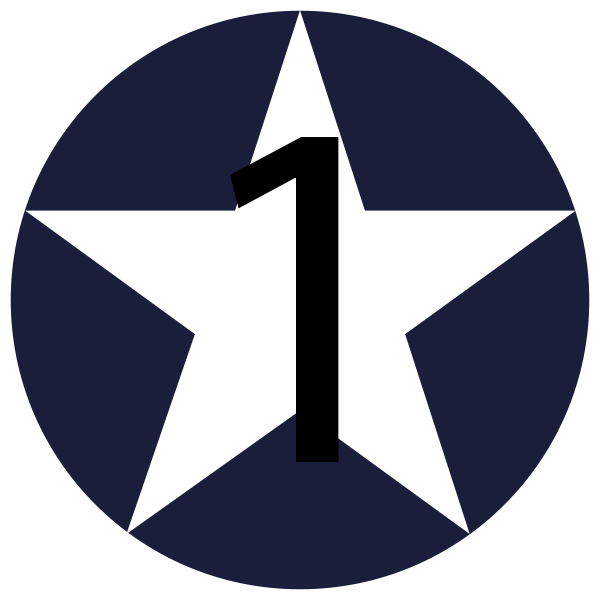
<style>
.page{position:relative;width:600px;height:600px;background:#ffffff}
.page>*{position:absolute;margin:0}
.t1{font:500px "MyriadPro-Regular";color:#000000}
</style>
<div class="page">
<p class="t1" style="left:230px;top:137px;width:109px;height:325px">1</p>
</div>
